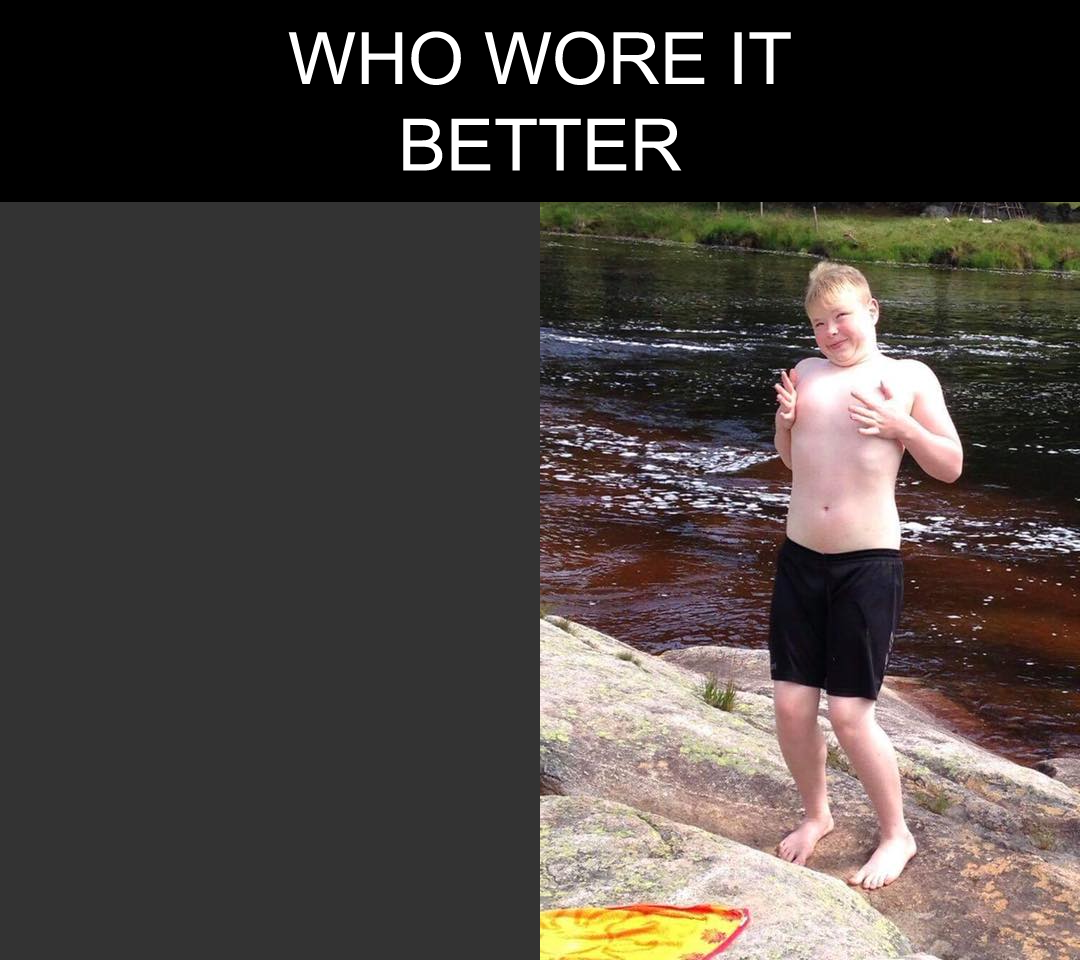
<style>
.page{position:relative;width:1080px;height:960px;background:#333333}
.page>*{position:absolute;margin:0}
.t1{font:72px "ArialMT";color:#ffffff}
</style>
<div class="page">
<p class="t1" style="left:288px;top:31px;width:503px;height:140px;text-align:center">WHO WORE IT<br>BETTER</p>
</div>
